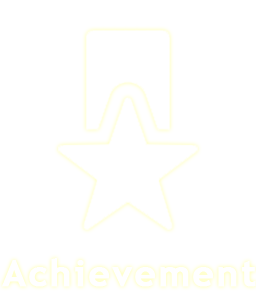
<style>
.page{position:relative;width:256px;height:300px;background:#ffffff}
.page>*{position:absolute;margin:0}
.t1{font:37px "TrebuchetMS-Bold";letter-spacing:0.05em;color:#ffffff;font-weight:bold}
</style>
<div class="page">
<p class="t1" style="left:2px;top:258px;width:254px;height:29px">Achievement</p>
</div>
